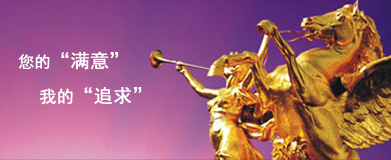
<style>
.page{position:relative;width:391px;height:160px}
.page>*{position:absolute;margin:0}
.t1{font:19px "SimHei";color:#ffffff;font-weight:bold}
.t2{font:15.9px "SimHei";color:#ffffff;font-weight:bold}
.t3{font:17px "SimHei";color:#ffffff;font-weight:bold}
</style>
<div class="page">
<p class="t1" style="left:18px;top:51px;width:100px;height:19px"><span class="t2">您的</span>“满意”</p>
<p class="t1" style="left:40px;top:87px;width:102px;height:18px"><span class="t3">我的</span>“追求”</p>
</div>
